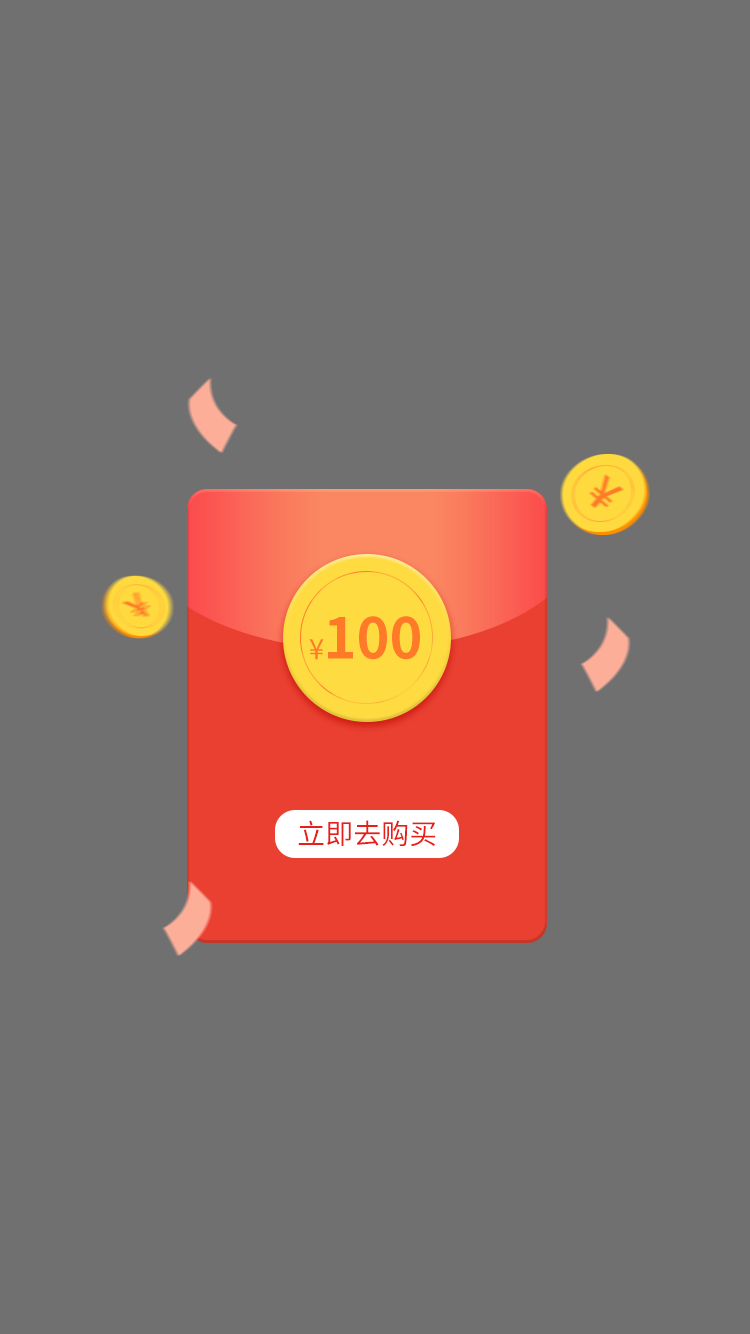
<style>
.page{position:relative;width:750px;height:1334px;background:#707070}
.page>*{position:absolute;margin:0}
.t1{font:56px "SourceHanSansCN-Bold";color:#fe7928;text-transform:uppercase}
.t2{font:28px "SourceHanSansCN-Regular";color:#fe7928;text-transform:uppercase}
.t3{font:28px "SourceHanSansCN-Regular";color:#e61f18;text-transform:uppercase}
</style>
<div class="page">
<p class="t1" style="left:328px;top:616px;width:92px;height:44px">100</p>
<p class="t2" style="left:309px;top:639px;width:15px;height:21px">¥</p>
<p class="t3" style="left:298px;top:820px;width:138px;height:27px">立即去购买</p>
</div>
